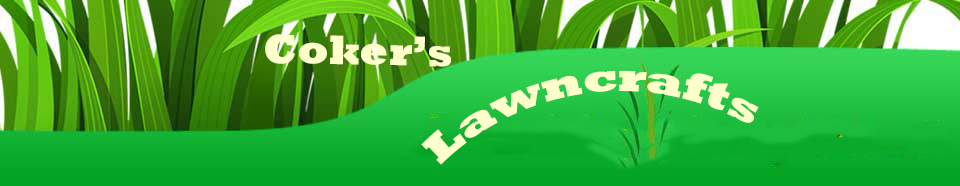
<style>
.page{position:relative;width:960px;height:186px}
.page>*{position:absolute;margin:0}
.t1{font:42px "Rockwell-ExtraBold";color:#ffffcc}
</style>
<div class="page">
<p class="t1" style="left:265px;top:34px;width:186px;height:33px;rotate:1deg">Coker’s</p>
<p class="t1" style="left:421px;top:70px;width:338px;height:95px">Lawncrafts</p>
</div>
